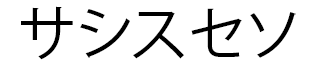
<style>
.page{position:relative;width:320px;height:64px;background:#ffffff}
.page>*{position:absolute;margin:0}
.t1{font:60px "KozGoPr6N-Regular";color:#000000}
</style>
<div class="page">
<p class="t1" style="left:21px;top:6px;width:275px;height:54px">サシスセソ</p>
</div>
